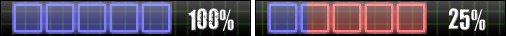
<style>
.page{position:relative;width:506px;height:36px}
.page>*{position:absolute;margin:0}
.t1{font:24px "YouAreLoved";color:#ffffff}
</style>
<div class="page">
<p class="t1" style="left:188px;top:8px;width:46px;height:23px">100%</p>
<p class="t1" style="left:448px;top:8px;width:38px;height:23px">25%</p>
</div>
